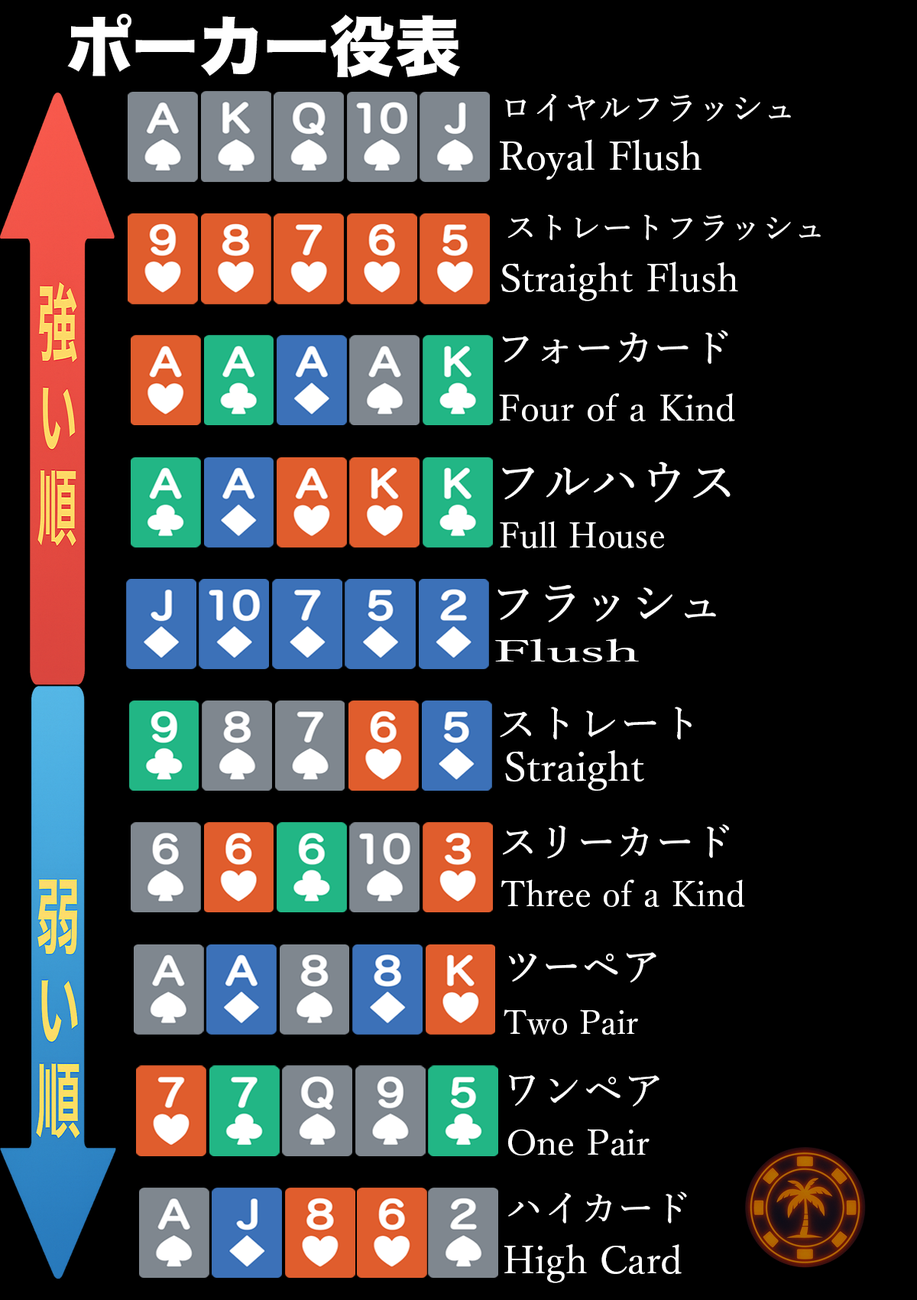
<style>
.page{position:relative;width:917px;height:1300px;background:#000000}
.page>*{position:absolute;margin:0}
.t1{font:65.8px "HiraKakuStdN-W8";color:#ffffff}
.t2{font:33px "YuMin-Medium";color:#ffffff}
.t3{font:39.7px "YuMin-Medium";color:#ffffff}
.t4{font:32.1px "YuMin-Medium";color:#ffffff}
.t5{font:38.9px "YuMin-Medium";color:#ffffff}
.t6{font:39.4px "YuMin-Medium";color:#ffffff}
.t7{font:36.4px "YuMin-Medium";color:#ffffff}
.t8{font:48.7px "YuMin-Medium";color:#ffffff}
.t9{font:34.5px "YuMin-Medium";color:#ffffff}
.t10{font:46.8px "YuMin-Medium";color:#ffffff}
.t11{font:29.7px "YuMin-Medium";color:#ffffff;scale:2.08 1}
.t12{font:41.3px "YuMin-Medium";color:#ffffff}
.t13{font:41.1px "YuMin-Medium";color:#ffffff}
.t14{font:39.1px "YuMin-Medium";color:#ffffff}
.t15{font:34.6px "YuMin-Medium";color:#ffffff}
.t16{font:39.5px "YuMin-Medium";color:#ffffff}
.t17{font:32.9px "YuMin-Medium";color:#ffffff}
.t18{font:40.8px "YuMin-Medium";color:#ffffff}
.t19{font:35.6px "YuMin-Medium";color:#ffffff}
.t20{font:36.9px "YuMin-Medium";color:#ffffff}
.t21{font:38.7px "YuMin-Medium";color:#ffffff}
</style>
<div class="page">
<p class="t1" style="left:67px;top:14px;width:393px;height:63px">ポーカー役表</p>
<p class="t2" style="left:505px;top:94px;width:286px;height:28px">ロイヤルフラッシュ</p>
<p class="t3" style="left:500px;top:139px;width:202px;height:41px">Royal Flush</p>
<p class="t4" style="left:508px;top:214px;width:313px;height:27px">ストレートフラッシュ</p>
<p class="t5" style="left:502px;top:261px;width:237px;height:40px">Straight Flush</p>
<p class="t6" style="left:502px;top:330px;width:227px;height:34px">フォーカード</p>
<p class="t7" style="left:499px;top:393px;width:236px;height:28px">Four of a Kind</p>
<p class="t8" style="left:502px;top:462px;width:229px;height:40px">フルハウス</p>
<p class="t9" style="left:500px;top:521px;width:164px;height:27px">Full House</p>
<p class="t10" style="left:498px;top:585px;width:218px;height:37px">フラッシュ</p>
<p class="t11" style="left:495px;top:638px;width:144px;height:24px">Flush</p>
<p class="t12" style="left:500px;top:706px;width:192px;height:33px">ストレート</p>
<p class="t13" style="left:505px;top:750px;width:140px;height:41px">Straight</p>
<p class="t14" style="left:503px;top:824px;width:226px;height:35px">スリーカード</p>
<p class="t15" style="left:502px;top:879px;width:243px;height:28px">Three of a Kind</p>
<p class="t16" style="left:509px;top:952px;width:148px;height:30px">ツーペア</p>
<p class="t17" style="left:504px;top:1009px;width:134px;height:25px">Two Pair</p>
<p class="t18" style="left:509px;top:1075px;width:151px;height:31px">ワンペア</p>
<p class="t19" style="left:508px;top:1128px;width:142px;height:27px">One Pair</p>
<p class="t20" style="left:508px;top:1191px;width:179px;height:32px">ハイカード</p>
<p class="t21" style="left:505px;top:1244px;width:177px;height:39px">High Card</p>
</div>
